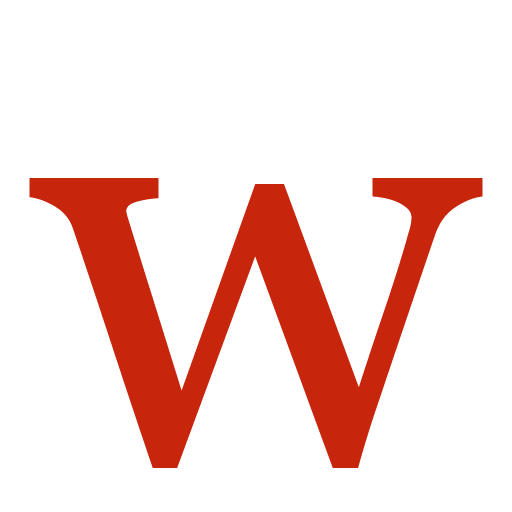
<style>
.page{position:relative;width:512px;height:512px;background:#ffffff}
.page>*{position:absolute;margin:0}
.t1{font:600px "Georgia";color:#c7260d}
</style>
<div class="page">
<p class="t1" style="left:29px;top:178px;width:454px;height:290px">w</p>
</div>
